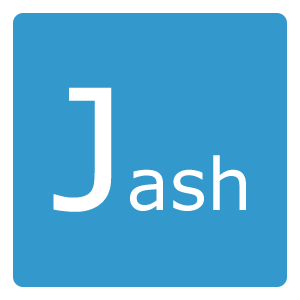
<style>
.page{position:relative;width:300px;height:300px;background:#3399cc}
.page>*{position:absolute;margin:0}
.t1{font:72px "Verdana";color:#ffffff}
.t2{font:168px "Verdana";color:#ffffff}
</style>
<div class="page">
<p class="t1" style="left:53px;top:87px;width:193px;height:125px"><span class="t2">J</span>ash</p>
</div>
